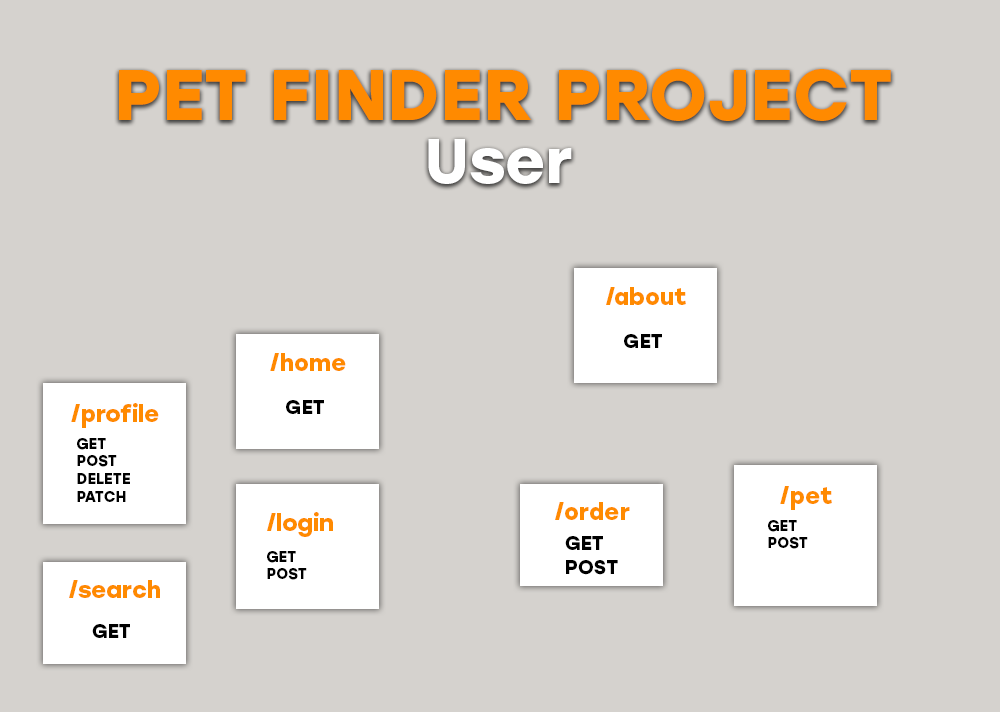
<style>
.page{position:relative;width:1000px;height:712px;background:#d5d2ce}
.page>*{position:absolute;margin:0}
.t1{font:72px "Stolzl-Bold";color:#ff8a00}
.t2{font:62.2px "Stolzl-Bold";color:#ffffff}
.t3{font:23.2px "Stolzl-Bold";color:#ff8a00}
.t4{font:19.5px "Stolzl-Bold";color:#000000}
.t5{font:14.8px "Stolzl-Bold";color:#000000}
</style>
<div class="page">
<p class="t1" style="left:119px;top:69px;width:772px;height:52px">PET FINDER PROJECT</p>
<p class="t2" style="left:428px;top:139px;width:144px;height:45px">User</p>
<p class="t3" style="left:606px;top:287px;width:80px;height:18px">/about</p>
<p class="t4" style="left:624px;top:334px;width:38px;height:14px">GET</p>
<p class="t3" style="left:270px;top:353px;width:76px;height:18px">/home</p>
<p class="t4" style="left:286px;top:400px;width:38px;height:14px">GET</p>
<p class="t3" style="left:71px;top:403px;width:88px;height:25px">/profile</p>
<p class="t5" style="left:77px;top:438px;width:53px;height:64px">GET<br>POST<br>DELETE<br>PATCH</p>
<p class="t3" style="left:780px;top:486px;width:52px;height:24px">/pet</p>
<p class="t3" style="left:555px;top:502px;width:75px;height:18px">/order</p>
<p class="t3" style="left:267px;top:512px;width:66px;height:25px">/login</p>
<p class="t5" style="left:768px;top:520px;width:40px;height:29px">GET<br>POST</p>
<p class="t4" style="left:565px;top:536px;width:53px;height:39px">GET<br>POST</p>
<p class="t5" style="left:267px;top:551px;width:40px;height:29px">GET<br>POST</p>
<p class="t3" style="left:69px;top:580px;width:91px;height:18px">/search</p>
<p class="t4" style="left:92px;top:624px;width:38px;height:14px">GET</p>
</div>
